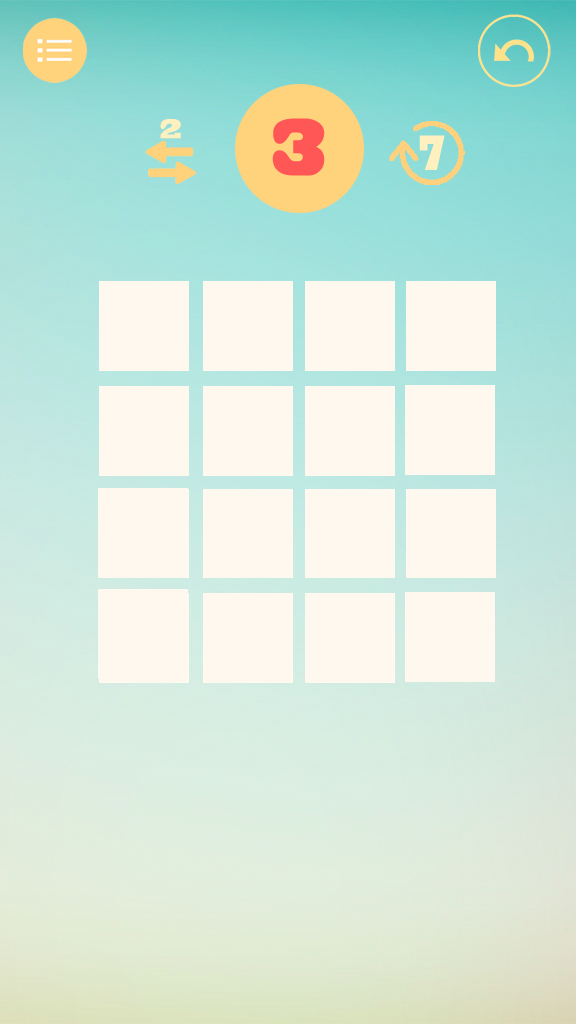
<style>
.page{position:relative;width:576px;height:1024px;background:#fff8ef}
.page>*{position:absolute;margin:0}
.t1{font:25.6px "BlackoakStd";color:#fff1bf;scale:0.61 1}
.t2{font:75.9px "BlackoakStd";color:#ff5656;scale:0.52 1}
.t3{font:45.9px "BlackoakStd";color:#fff1bf;scale:0.43 1}
</style>
<div class="page">
<p class="t1" style="left:160px;top:119px;width:21px;height:20px">2</p>
<p class="t2" style="left:272px;top:118px;width:53px;height:58px">3</p>
<p class="t3" style="left:419px;top:135px;width:26px;height:35px">7</p>
</div>
